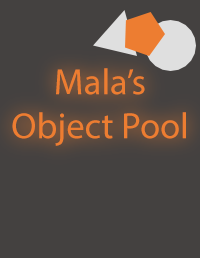
<style>
.page{position:relative;width:200px;height:258px;background:#444140}
.page>*{position:absolute;margin:0}
.t1{font:36.6px "MyriadPro-Regular";color:#ed7d31}
</style>
<div class="page">
<p class="t1" style="left:12px;top:68px;width:174px;height:78px;text-align:center">Mala’s Object Pool</p>
</div>
